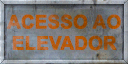
<style>
.page{position:relative;width:128px;height:64px}
.page>*{position:absolute;margin:0}
.t1{font:18.7px/21.3px "Arial-BoldMT";letter-spacing:-0.01em;text-transform:uppercase;font-weight:bold}
</style>
<div class="page">
<p class="t1" style="left:6px;top:14px;width:115px;height:37px;text-align:center">ACESSO AO<br>ELEVADOR</p>
</div>
